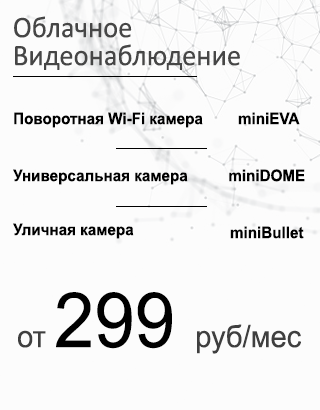
<style>
.page{position:relative;width:320px;height:410px;background:#fcfcfc}
.page>*{position:absolute;margin:0}
.t1{font:30px/28px "Calibri";color:#464646;scale:0.95 1}
.t2{font:16px "Arial-BoldMT";color:#000000;scale:0.95 1}
.t3{font:30.6px "ArialMT";color:#3f3f3f;scale:0.95 1}
.t4{font:76.4px "ArialMT";color:#000000;scale:0.95 1}
</style>
<div class="page">
<p class="t1" style="left:14px;top:16px;width:226px;height:54px">Облачное<br>Видеонаблюдение</p>
<p class="t2" style="left:14px;top:112px;width:189px;height:16px">Поворотная Wi-Fi камера</p>
<p class="t2" style="left:238px;top:112px;width:62px;height:13px">miniEVA</p>
<p class="t2" style="left:13px;top:169px;width:175px;height:16px">Универсальная камера</p>
<p class="t2" style="left:229px;top:169px;width:76px;height:13px">miniDOME</p>
<p class="t2" style="left:13px;top:223px;width:121px;height:16px">Уличная камера</p>
<p class="t2" style="left:230px;top:226px;width:74px;height:13px">miniBullet</p>
<p class="t3" style="left:18px;top:292px;width:283px;height:62px">от <span class="t4">299 </span>руб/мес</p>
</div>
